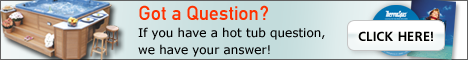
<style>
.page{position:relative;width:468px;height:60px}
.page>*{position:absolute;margin:0}
.t1{font:12px/17px "Verdana";color:#000000}
.t2{font:20px/17px "DinC";color:#ff3000}
.t3{font:13px "font180";color:#000000}
</style>
<div class="page">
<p class="t1" style="left:138px;top:5px;width:187px;height:52px"><span class="t2">Got a Question?<br></span>If you have a hot tub question, <br>we have your answer!</p>
<p class="t3" style="left:358px;top:31px;width:75px;height:10px">CLICK HERE!</p>
</div>
